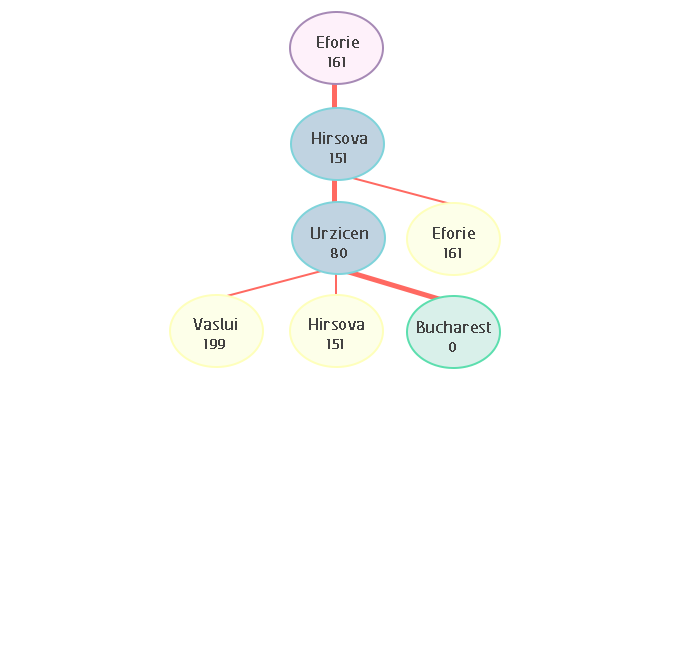
<style>
.page{position:relative;width:674px;height:660px;background:#ffffff}
.page>*{position:absolute;margin:0}
.t1{font:20.8px "FCActiveRegular";color:#424242;font-weight:bold}
.t2{font:16.7px "FCActiveRegular";color:#424141;font-weight:bold}
</style>
<div class="page">
<p class="t1" style="left:317px;top:36px;width:42px;height:12px">Eforie</p>
<p class="t2" style="left:328px;top:57px;width:17px;height:10px">161</p>
<p class="t1" style="left:312px;top:132px;width:55px;height:12px">Hirsova</p>
<p class="t2" style="left:330px;top:153px;width:16px;height:10px">151</p>
<p class="t1" style="left:311px;top:227px;width:57px;height:12px">Urzicen</p>
<p class="t1" style="left:433px;top:227px;width:42px;height:12px">Eforie</p>
<p class="t2" style="left:331px;top:248px;width:16px;height:10px">80</p>
<p class="t2" style="left:444px;top:248px;width:17px;height:10px">161</p>
<p class="t1" style="left:193px;top:318px;width:44px;height:12px">Vaslui</p>
<p class="t1" style="left:309px;top:318px;width:55px;height:12px">Hirsova</p>
<p class="t1" style="left:417px;top:321px;width:74px;height:12px">Bucharest</p>
<p class="t2" style="left:204px;top:339px;width:21px;height:10px">199</p>
<p class="t2" style="left:327px;top:339px;width:16px;height:10px">151</p>
<p class="t2" style="left:449px;top:342px;width:7px;height:10px">0</p>
</div>
